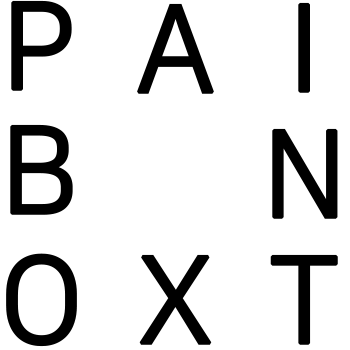
<style>
.page{position:relative;width:350px;height:350px;background:#ffffff}
.page>*{position:absolute;margin:0}
.t1{font:120px "NanumSquareR";color:#000000;font-weight:bold}
</style>
<div class="page">
<p class="t1" style="left:11px;top:0px;width:61px;height:91px">P</p>
<p class="t1" style="left:137px;top:3px;width:77px;height:91px">A</p>
<p class="t1" style="left:298px;top:2px;width:12px;height:91px">I</p>
<p class="t1" style="left:10px;top:124px;width:63px;height:91px">B</p>
<p class="t1" style="left:272px;top:128px;width:66px;height:91px">N</p>
<p class="t1" style="left:6px;top:253px;width:71px;height:94px">O</p>
<p class="t1" style="left:139px;top:254px;width:73px;height:91px">X</p>
<p class="t1" style="left:270px;top:254px;width:68px;height:91px">T</p>
</div>
